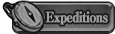
<style>
.page{position:relative;width:115px;height:34px}
.page>*{position:absolute;margin:0}
.t1{font:14px "RyuminPro-ExBold";letter-spacing:-0.08em;color:#9e9e9e;font-weight:bold;scale:0.9 1}
</style>
<div class="page">
<p class="t1" style="left:45px;top:11px;width:63px;height:14px">Expeditions</p>
</div>
